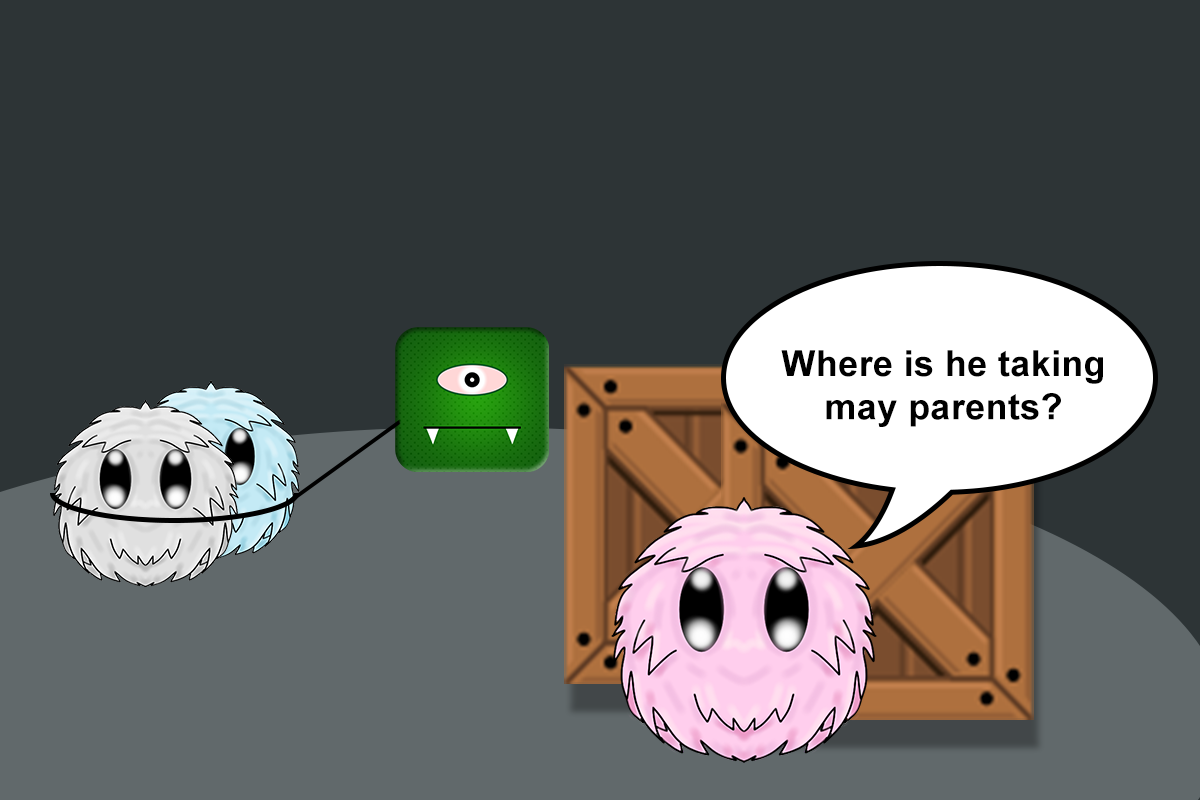
<style>
.page{position:relative;width:1200px;height:800px;background:#2d3436}
.page>*{position:absolute;margin:0}
.t1{font:36px "Arial-BoldMT";letter-spacing:0.01em;color:#000000}
</style>
<div class="page">
<p class="t1" style="left:781px;top:350px;width:322px;height:77px;text-align:center">Where is he taking may parents?</p>
</div>
